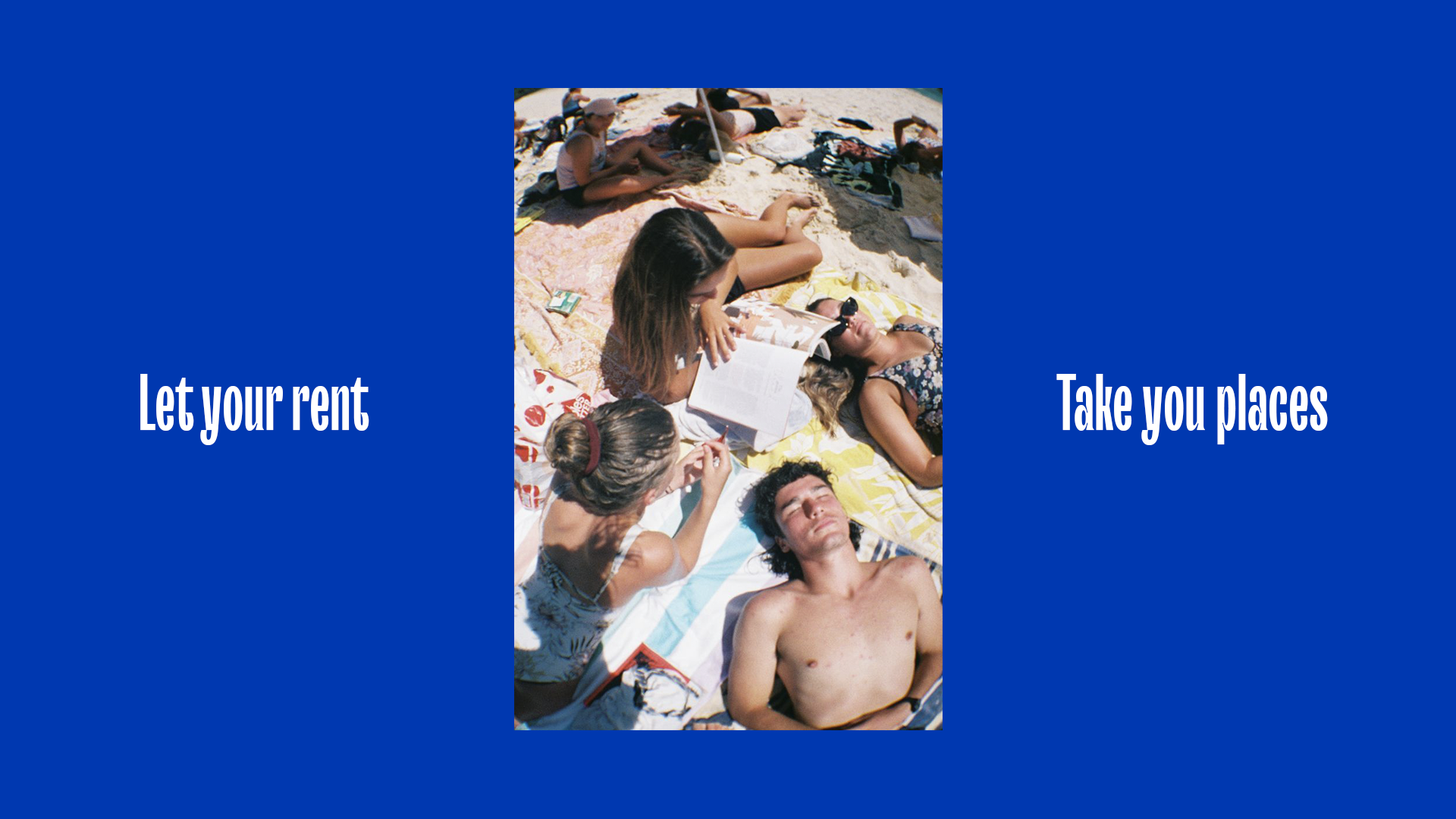
<style>
.page{position:relative;width:1456px;height:819px;background:#0038b0}
.page>*{position:absolute;margin:0}
.t1{font:80.3px "TTTrailersTrial-Db";color:#ffffff}
</style>
<div class="page">
<p class="t1" style="left:140px;top:374px;width:229px;height:71px">Let your rent</p>
<p class="t1" style="left:1056px;top:374px;width:272px;height:71px">Take you places</p>
</div>
